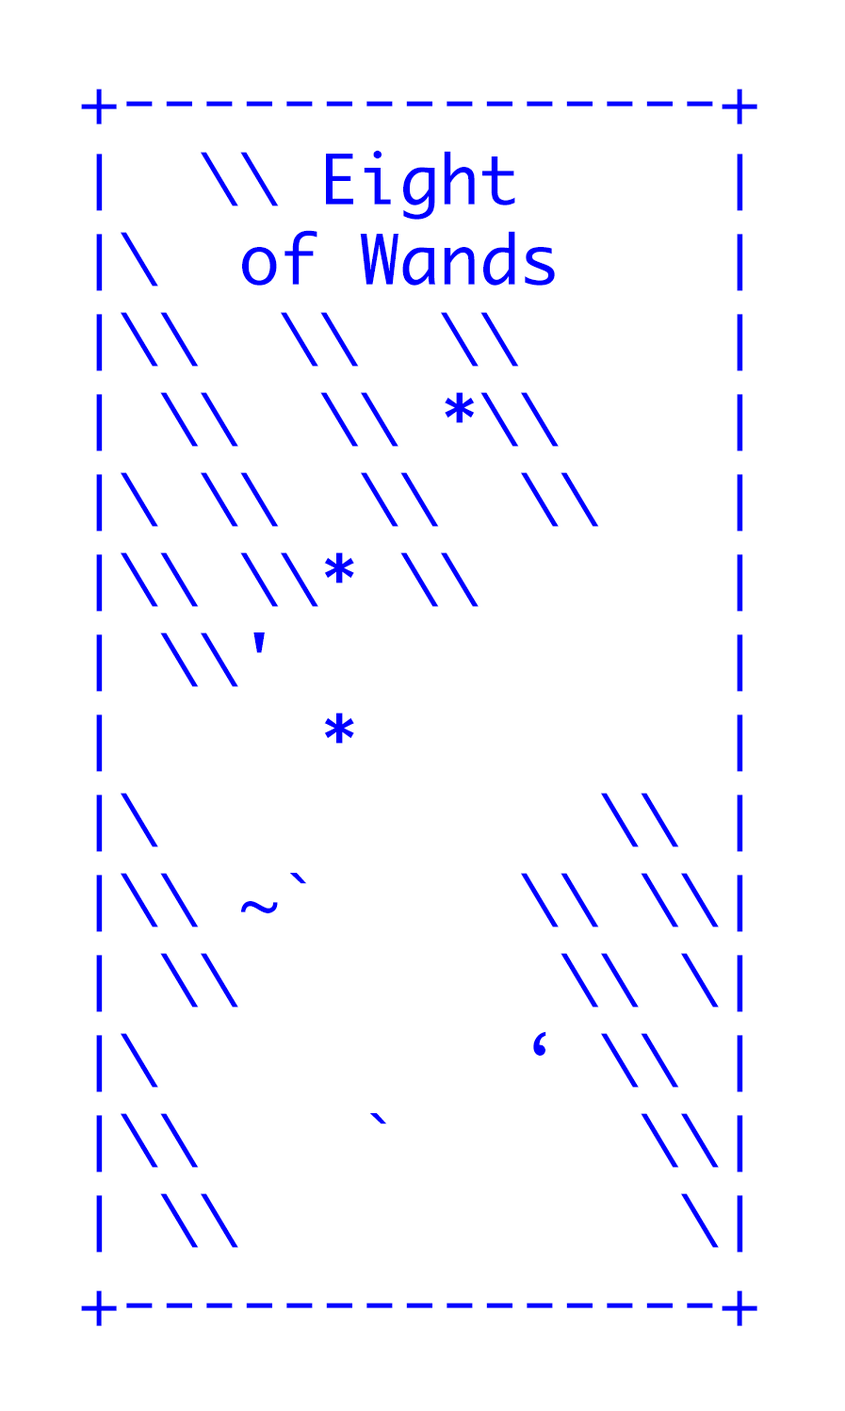
<style>
.page{position:relative;width:845px;height:1411px;background:#ffffff}
.page>*{position:absolute;margin:0}
.t1{font:66.7px "Monaco";color:#0000ff}
</style>
<div class="page">
<p class="t1" style="left:81px;top:89px;width:677px;height:1237px">+---------------+<br>│  \\ Eight     │<br>│\  of Wands    │<br>│\\  \\  \\     │<br>│ \\  \\ *\\    │<br>│\ \\  \\  \\   │<br>│\\ \\* \\      │<br>│ \\'           │ <br>│     *         │ <br>│\           \\ │<br>│\\ ~`     \\ \\│ <br>│ \\        \\ \│ <br>│\         ‘ \\ │<br>│\\    `      \\│<br>│ \\           \│<br>+---------------+</p>
</div>
